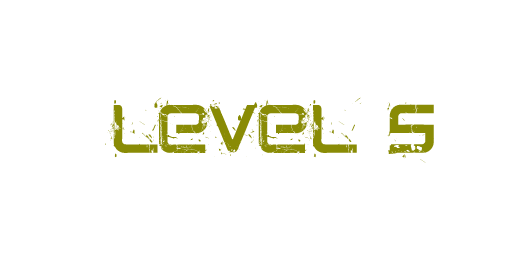
<style>
.page{position:relative;width:512px;height:256px;background:#ffffff}
.page>*{position:absolute;margin:0}
.t1{font:48px "CRUSHED";color:#898b05}
</style>
<div class="page">
<p class="t1" style="left:105px;top:97px;width:329px;height:66px">level 5</p>
</div>
